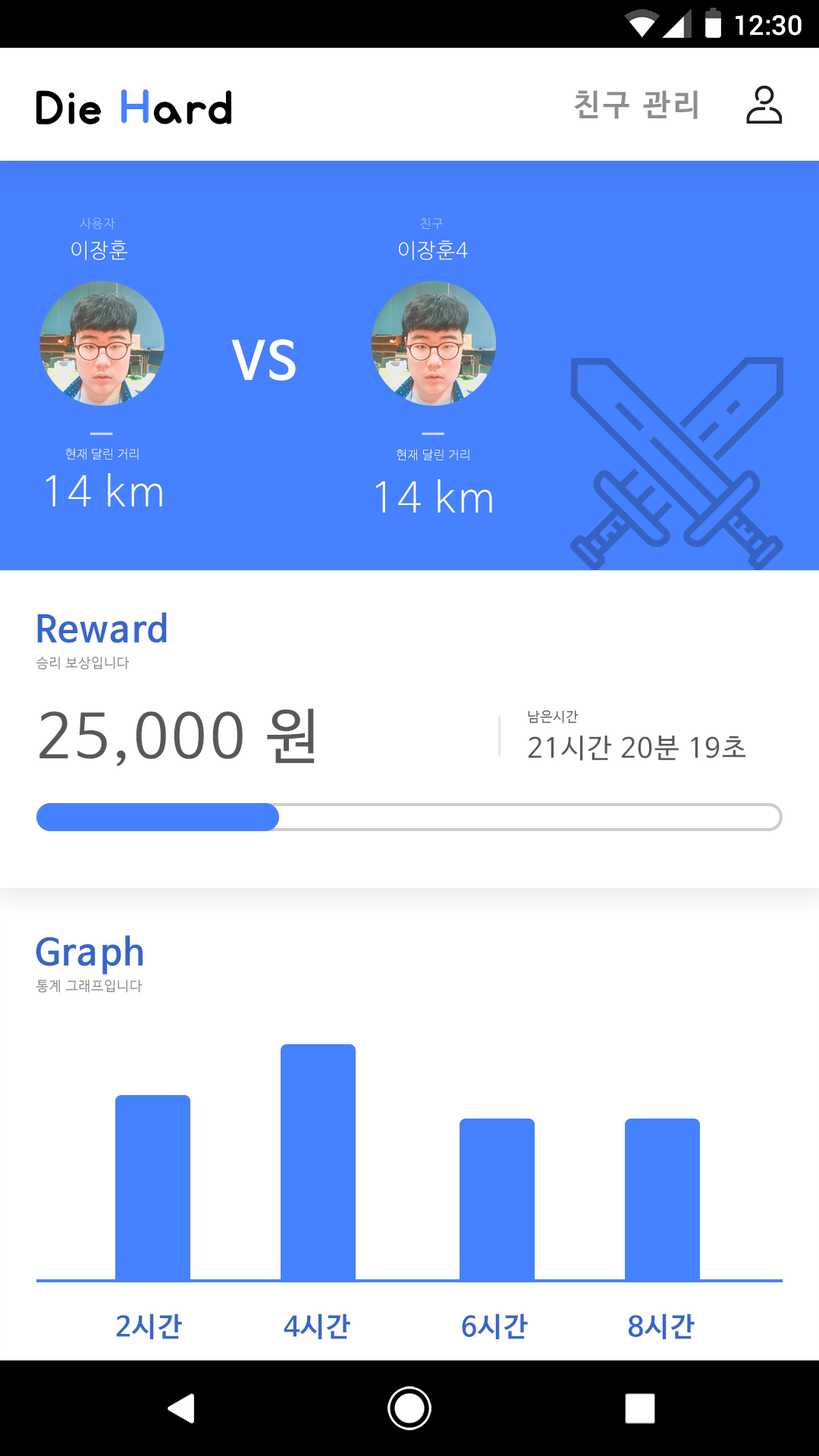
<style>
.page{position:relative;width:819px;height:1456px;background:#ffffff}
.page>*{position:absolute;margin:0}
.t1{font:27.3px "Roboto-Medium";color:#ffffff}
.t2{font:30.3px "NanumBarunGothicBold";letter-spacing:0.1em;color:#8d8d8d}
.t3{font:12.6px "NanumBarunGothicLight";letter-spacing:0.05em}
.t4{font:12.6px "NanumBarunGothicLight";letter-spacing:0.05em;color:#b2c7ff}
.t5{font:20.6px "NanumBarunGothicLight";letter-spacing:0.05em;color:#ffffff}
.t6{font:52px "NanumBarunGothicBold";letter-spacing:0.05em;color:#ffffff}
.t7{font:12.1px "NanumBarunGothicLight";letter-spacing:0.05em;color:#ffffff}
.t8{font:41.3px "NanumBarunGothicLight";letter-spacing:0.05em;color:#ffffff}
.t9{font:36.4px "NanumBarunGothicBold";letter-spacing:0.05em;color:#3766c9}
.t10{font:13.7px "NanumBarunGothic";letter-spacing:0.05em;color:#8d8d8d}
.t11{font:60.7px "NanumBarunGothic";letter-spacing:0.05em;color:#585858}
.t12{font:13.7px "NanumBarunGothic";letter-spacing:0.05em;color:#585858}
.t13{font:27.4px "NanumBarunGothic";letter-spacing:0.05em;color:#585858}
.t14{font:27.3px "NanumBarunGothicBold";letter-spacing:0.05em;color:#3766c9}
</style>
<div class="page">
<p class="t1" style="left:736px;top:15px;width:66px;height:21px">12:30</p>
<p class="t2" style="left:574px;top:90px;width:124px;height:29px">친구 관리</p>
<p class="t3" style="left:80px;top:218px;width:35px;height:12px">사용자</p>
<p class="t4" style="left:420px;top:218px;width:23px;height:12px">친구</p>
<p class="t5" style="left:71px;top:240px;width:56px;height:20px">이장훈</p>
<p class="t5" style="left:399px;top:240px;width:69px;height:20px">이장훈4</p>
<p class="t6" style="left:231px;top:339px;width:65px;height:42px">VS</p>
<p class="t7" style="left:65px;top:448px;width:74px;height:12px">현재 달린 거리</p>
<p class="t7" style="left:397px;top:449px;width:72px;height:11px">현재 달린 거리</p>
<p class="t8" style="left:46px;top:473px;width:116px;height:34px">14 km</p>
<p class="t8" style="left:376px;top:479px;width:116px;height:34px">14 km</p>
<p class="t9" style="left:37px;top:612px;width:130px;height:31px">Reward</p>
<p class="t10" style="left:36px;top:656px;width:93px;height:14px">승리 보상입니다</p>
<p class="t11" style="left:39px;top:708px;width:276px;height:59px">25,000 원</p>
<p class="t12" style="left:528px;top:710px;width:50px;height:13px">남은시간</p>
<p class="t13" style="left:529px;top:736px;width:217px;height:25px">21시간 20분 19초</p>
<p class="t9" style="left:36px;top:935px;width:107px;height:39px">Graph</p>
<p class="t10" style="left:36px;top:980px;width:106px;height:13px">통계 그래프입니다</p>
<p class="t14" style="left:116px;top:1313px;width:66px;height:26px">2시간</p>
<p class="t14" style="left:284px;top:1313px;width:66px;height:26px">4시간</p>
<p class="t14" style="left:462px;top:1313px;width:66px;height:26px">6시간</p>
<p class="t14" style="left:629px;top:1313px;width:66px;height:26px">8시간</p>
</div>
